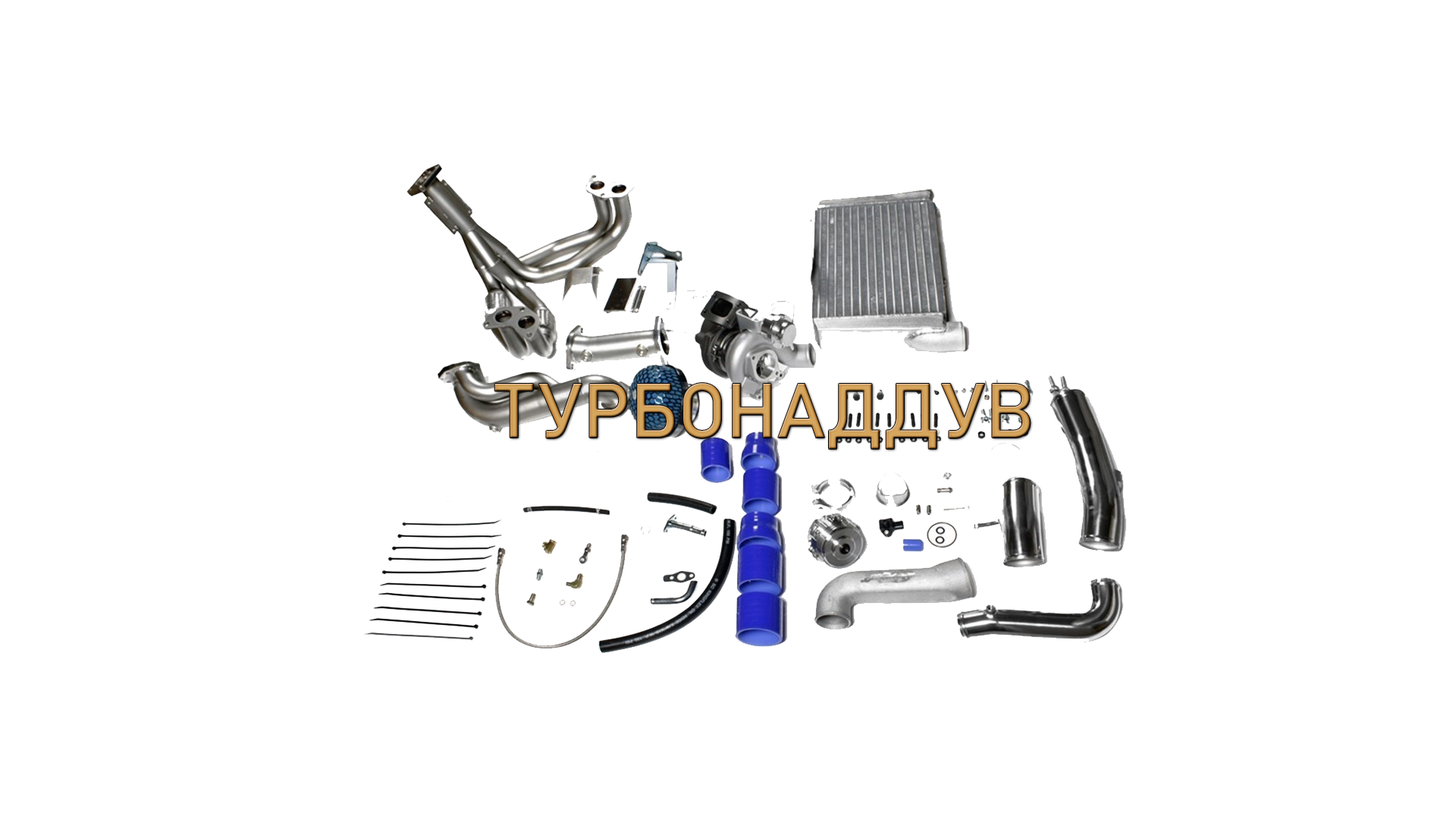
<style>
.page{position:relative;width:1456px;height:819px;background:#ffffff}
.page>*{position:absolute;margin:0}
.t1{font:75.8px "Bahnschrift";color:#d6a75f;text-transform:uppercase}
</style>
<div class="page">
<p class="t1" style="left:494px;top:383px;width:537px;height:66px">Турбонаддув</p>
</div>
